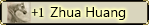
<style>
.page{position:relative;width:149px;height:25px;background:#d9d5bd}
.page>*{position:absolute;margin:0}
.t1{font:14px "LaoUI";color:#000000}
</style>
<div class="page">
<p class="t1" style="left:50px;top:7px;width:76px;height:13px">Zhua Huang</p>
</div>
